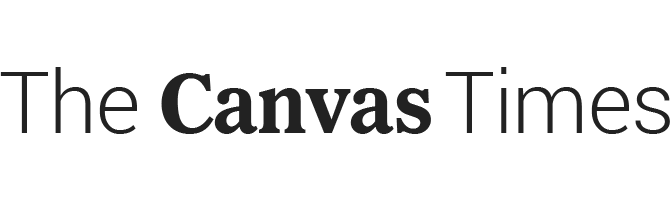
<style>
.page{position:relative;width:670px;height:200px;background:#ffffff}
.page>*{position:absolute;margin:0}
.t1{font:86px "Roboto-Light";letter-spacing:-0.01em;color:#222222}
.t2{font:86px "NYTImperial-Bold";letter-spacing:-0.01em;color:#222222}
</style>
<div class="page">
<p class="t1" style="left:0px;top:67px;width:137px;height:67px">The</p>
<p class="t2" style="left:161px;top:73px;width:270px;height:61px">Canvas</p>
<p class="t1" style="left:445px;top:67px;width:225px;height:67px">Times</p>
</div>
